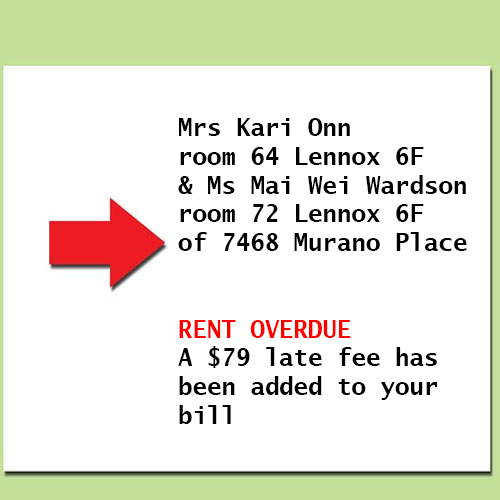
<style>
.page{position:relative;width:500px;height:500px;background:#ffffff}
.page>*{position:absolute;margin:0}
.t1{font:24px "LucidaSans-TypewriterBold";color:#000000}
.t2{font:24px "LucidaSans-TypewriterBold";color:#ff0000}
</style>
<div class="page">
<p class="t1" style="left:178px;top:118px;width:289px;height:306px">Mrs Kari Onn<br>room 64 Lennox 6F<br>&amp; Ms Mai Wei Wardson<br>room 72 Lennox 6F<br>of 7468 Murano Place<br><br><br><span class="t2">RENT OVERDUE<br></span>A $79 late fee has<br>been added to your<br>bill</p>
</div>
